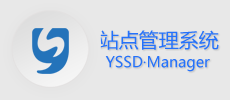
<style>
.page{position:relative;width:230px;height:100px;background:#e8e8e8}
.page>*{position:absolute;margin:0}
.t1{font:20px "MicrosoftYaHei";color:#2572fb}
.t2{font:14.7px "MicrosoftYaHei";color:#2572fb}
</style>
<div class="page">
<p class="t1" style="left:99px;top:30px;width:120px;height:20px">站点管理系统</p>
<p class="t2" style="left:105px;top:55px;width:105px;height:17px">YSSD·Manager</p>
</div>
